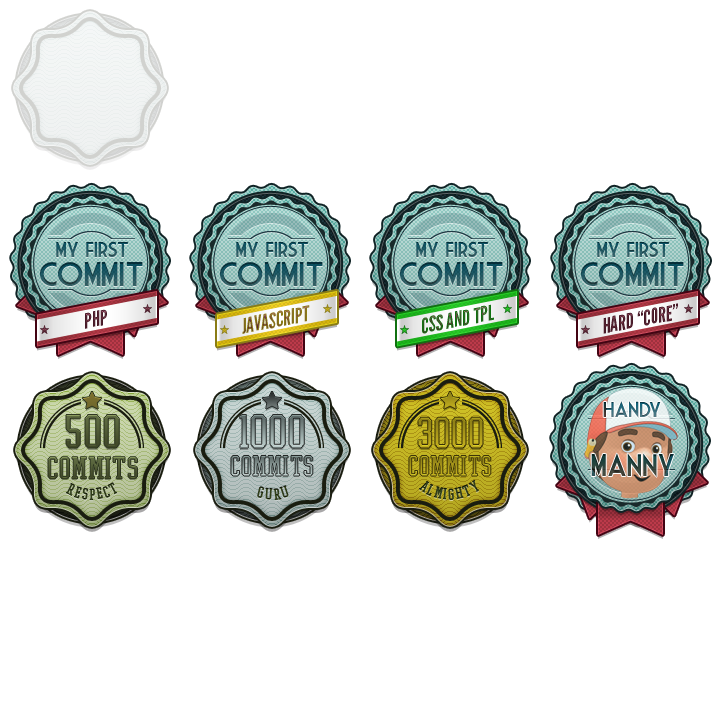
<style>
.page{position:relative;width:720px;height:720px;background:#ffffff}
.page>*{position:absolute;margin:0}
.t1{font:21px "MarketDeco";letter-spacing:-0.04em;color:#1b5763}
.t2{font:33px "MarketDeco";letter-spacing:-0.04em;color:#1c545e}
.t3{font:21.1px "LeagueGothic";color:#876c22}
.t4{font:21.1px "LeagueGothic"}
.t5{font:21.1px "LeagueGothic";color:#4d1e2b}
.t6{font:21.1px "LeagueGothic";color:#4e1f2d}
.t7{font:21px "MarketDeco";letter-spacing:-0.04em}
.t8{font:36px "CollegeBoy";letter-spacing:0.05em;color:#4c5632}
.t9{font:24px "CollegeBoy";letter-spacing:0.05em;color:#4f5a35}
.t10{font:22px "CollegeBoy";letter-spacing:0.05em}
.t11{font:30px "MarketDeco";letter-spacing:-0.04em}
.t12{font:12px "CollegeBoy";letter-spacing:0.2em;color:#2d3b17}
.t13{font:12px "CollegeBoy";letter-spacing:0.2em;color:#303f18}
.t14{font:12px "CollegeBoy";letter-spacing:0.2em;color:#2f3e18}
</style>
<div class="page">
<p class="t1" style="left:56px;top:241px;width:72px;height:16px">My first</p>
<p class="t1" style="left:236px;top:241px;width:72px;height:16px">My first</p>
<p class="t1" style="left:416px;top:241px;width:72px;height:16px">My first</p>
<p class="t1" style="left:597px;top:241px;width:72px;height:16px">My first</p>
<p class="t2" style="left:40px;top:262px;width:103px;height:24px">COMMIT</p>
<p class="t2" style="left:220px;top:262px;width:103px;height:24px">COMMIT</p>
<p class="t2" style="left:400px;top:262px;width:103px;height:24px">COMMIT</p>
<p class="t2" style="left:581px;top:262px;width:103px;height:24px">COMMIT</p>
<p class="t3" style="left:242px;top:305px;width:68px;height:29px;rotate:-11deg">JAVASCRIPT</p>
<p class="t4" style="left:422px;top:304px;width:72px;height:30px;rotate:-11deg">CSS AND TPL</p>
<p class="t5" style="left:603px;top:303px;width:75px;height:31px;rotate:-11deg">HARD “CORE”</p>
<p class="t6" style="left:85px;top:309px;width:22px;height:20px;rotate:-11deg">PHP</p>
<p class="t7" style="left:603px;top:401px;width:58px;height:17px">Handy</p>
<p class="t8" style="left:66px;top:414px;width:54px;height:34px">500</p>
<p class="t9" style="left:48px;top:456px;width:90px;height:23px">COMMITS</p>
<p class="t10" style="left:230px;top:455px;width:83px;height:22px">COMMITS</p>
<p class="t11" style="left:591px;top:453px;width:83px;height:24px">Manny</p>
<p class="t12" style="left:66px;top:482px;width:51px;height:19px">RESPECT</p>
<p class="t13" style="left:257px;top:485px;width:32px;height:16px">GURU</p>
<p class="t14" style="left:419px;top:479px;width:60px;height:22px">ALMIGHTY</p>
</div>
